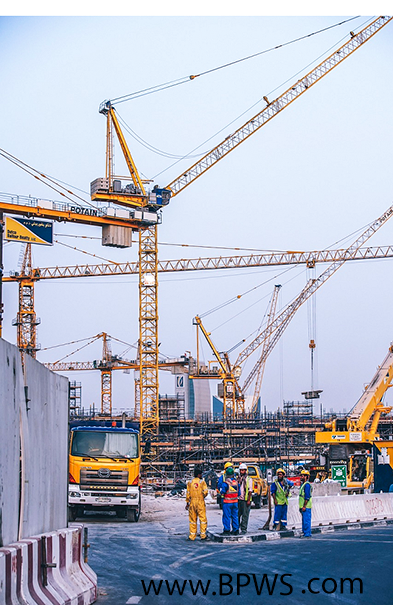
<style>
.page{position:relative;width:393px;height:605px}
.page>*{position:absolute;margin:0}
.t1{font:32px "MyriadPro-Regular";color:#000000}
</style>
<div class="page">
<p class="t1" style="left:140px;top:573px;width:153px;height:23px">www.BPWS</p>
<p class="t1" style="left:301px;top:577px;width:62px;height:17px">.com</p>
</div>
